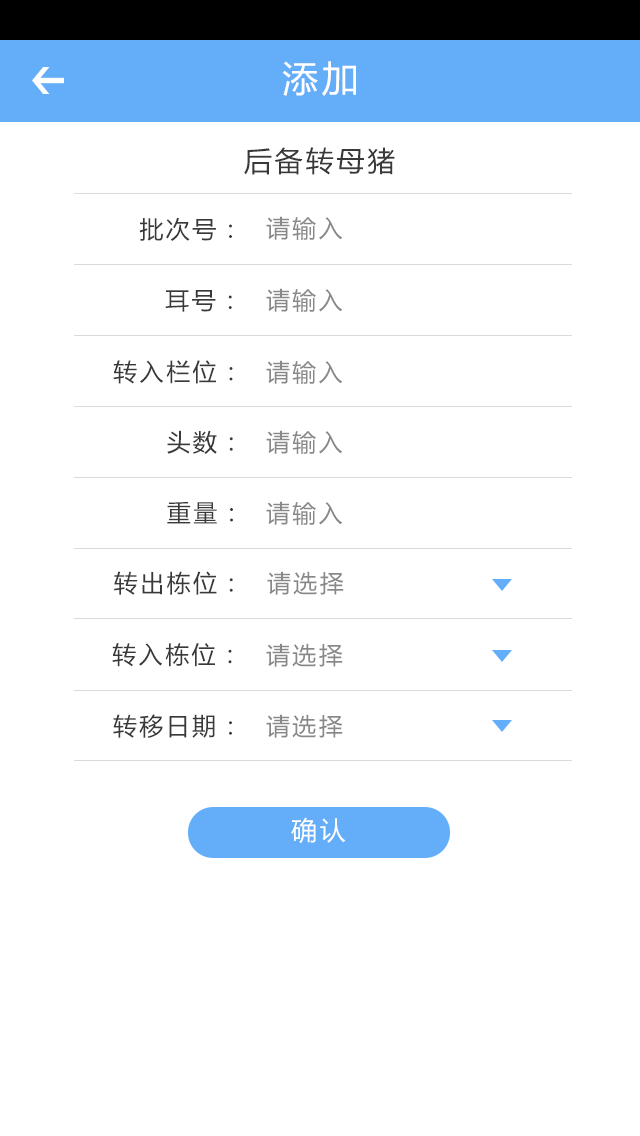
<style>
.page{position:relative;width:640px;height:1136px;background:#ffffff}
.page>*{position:absolute;margin:0}
.t1{font:36px "MicrosoftYaHei";letter-spacing:0.1em;color:#ffffff}
.t2{font:28px "MicrosoftYaHei";letter-spacing:0.1em;color:#3a3939}
.t3{font:24px "MicrosoftYaHei";letter-spacing:0.1em;color:#3a3939}
.t4{font:24px "MicrosoftYaHei";letter-spacing:0.1em;color:#898888}
.t5{font:26px "MicrosoftYaHei";letter-spacing:0.1em;color:#ffffff}
</style>
<div class="page">
<p class="t1" style="left:282px;top:61px;width:74px;height:35px">添加</p>
<p class="t2" style="left:244px;top:147px;width:151px;height:28px">后备转母猪</p>
<p class="t3" style="left:139px;top:217px;width:93px;height:24px">批次号：</p>
<p class="t4" style="left:266px;top:216px;width:77px;height:24px">请输入</p>
<p class="t3" style="left:165px;top:290px;width:67px;height:22px">耳号：</p>
<p class="t4" style="left:266px;top:288px;width:77px;height:24px">请输入</p>
<p class="t3" style="left:113px;top:360px;width:120px;height:24px">转入栏位：</p>
<p class="t4" style="left:266px;top:360px;width:77px;height:24px">请输入</p>
<p class="t3" style="left:167px;top:430px;width:66px;height:24px">头数：</p>
<p class="t4" style="left:266px;top:430px;width:77px;height:24px">请输入</p>
<p class="t3" style="left:167px;top:501px;width:66px;height:23px">重量：</p>
<p class="t4" style="left:266px;top:501px;width:77px;height:24px">请输入</p>
<p class="t3" style="left:114px;top:571px;width:119px;height:24px">转出栋位：</p>
<p class="t4" style="left:267px;top:571px;width:77px;height:24px">请选择</p>
<p class="t3" style="left:112px;top:643px;width:120px;height:24px">转入栋位：</p>
<p class="t4" style="left:266px;top:643px;width:77px;height:24px">请选择</p>
<p class="t3" style="left:113px;top:714px;width:119px;height:24px">转移日期：</p>
<p class="t4" style="left:266px;top:714px;width:77px;height:24px">请选择</p>
<p class="t5" style="left:291px;top:817px;width:55px;height:27px">确认</p>
</div>
